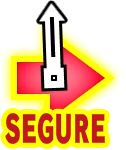
<style>
.page{position:relative;width:126px;height:150px;background:#ffffff}
.page>*{position:absolute;margin:0}
.t1{font:37.3px "RodinNTLGPro-UB";color:#c0191f;scale:0.6 1}
</style>
<div class="page">
<p class="t1" style="left:5px;top:113px;width:100px;height:31px">SEGURE</p>
</div>
